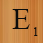
<style>
.page{position:relative;width:43px;height:43px}
.page>*{position:absolute;margin:0}
.t1{font:30px "TimesNewRomanPSMT";color:#0c0c0b}
.t2{font:12px "TimesNewRomanPSMT";color:#0c0c0b}
</style>
<div class="page">
<p class="t1" style="left:12px;top:9px;width:18px;height:20px">E</p>
<p class="t2" style="left:34px;top:27px;width:4px;height:9px">1</p>
</div>
